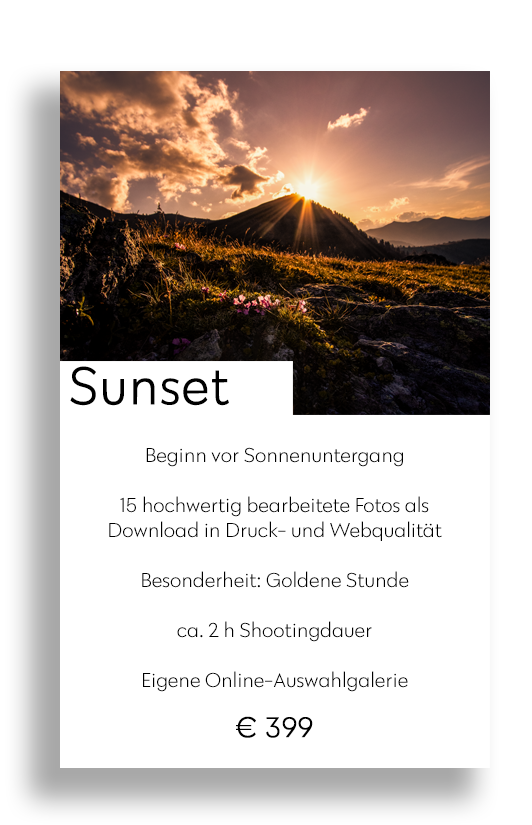
<style>
.page{position:relative;width:532px;height:825px;background:#ffffff}
.page>*{position:absolute;margin:0}
.t1{font:54.4px "Klik-Light";color:#000000;font-weight:bold}
.t2{font:20.8px/50px "Klik-Light";color:#000000}
.t3{font:20.8px "Klik-Light";color:#000000}
.t4{font:29.2px/50px "Klik-Light";color:#000000;font-weight:bold}
</style>
<div class="page">
<p class="t1" style="left:70px;top:366px;width:159px;height:40px">Sunset</p>
<p class="t2" style="left:109px;top:447px;width:333px;height:291px;text-align:center">Beginn vor Sonnenuntergang<br>15 hochwertig bearbeitete Fotos als<br><span class="t3">Download in Druck- und Webqualität<br></span>Besonderheit: Goldene Stunde<br>ca. 2 h Shootingdauer<br>Eigene Online-Auswahlgalerie<br><span class="t4">€ 399</span></p>
</div>
